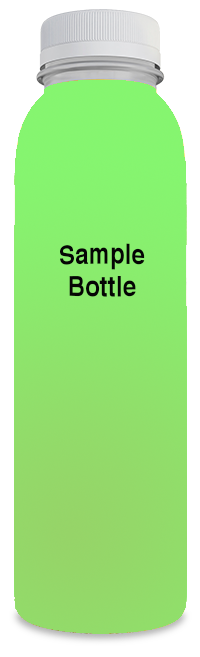
<style>
.page{position:relative;width:200px;height:657px;background:#ffffff}
.page>*{position:absolute;margin:0}
.t1{font:24px "Helvetica-Bold";color:#050505}
</style>
<div class="page">
<p class="t1" style="left:60px;top:243px;width:85px;height:54px;text-align:center">Sample <br>Bottle</p>
</div>
